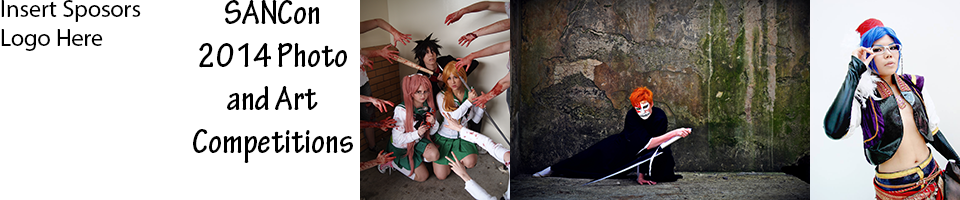
<style>
.page{position:relative;width:960px;height:200px;background:#ffffff}
.page>*{position:absolute;margin:0}
.t1{font:24px "MyriadPro-Regular";color:#000000}
.t2{font:36px "TektonPro-BoldCond";color:#000000}
</style>
<div class="page">
<p class="t1" style="left:1px;top:0px;width:140px;height:51px">Insert Sposors Logo Here</p>
<p class="t2" style="left:193px;top:0px;width:160px;height:163px;text-align:center">SANCon<br>2014 Photo<br>and Art<br>Competitions</p>
</div>
